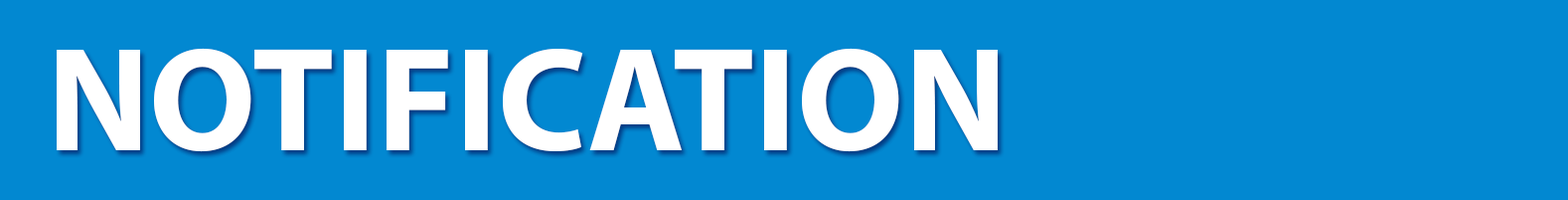
<style>
.page{position:relative;width:1568px;height:200px;background:#0288d1}
.page>*{position:absolute;margin:0}
.t1{font:149px "MyriadPro-Bold";color:#ffffff}
</style>
<div class="page">
<p class="t1" style="left:57px;top:48px;width:941px;height:104px">NOTIFICATION</p>
</div>
